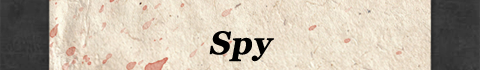
<style>
.page{position:relative;width:480px;height:70px}
.page>*{position:absolute;margin:0}
.t1{font:32px "Georgia-Bold";color:#000000;font-weight:bold;font-style:italic}
</style>
<div class="page">
<p class="t1" style="left:209px;top:31px;width:65px;height:31px">Spy</p>
</div>
